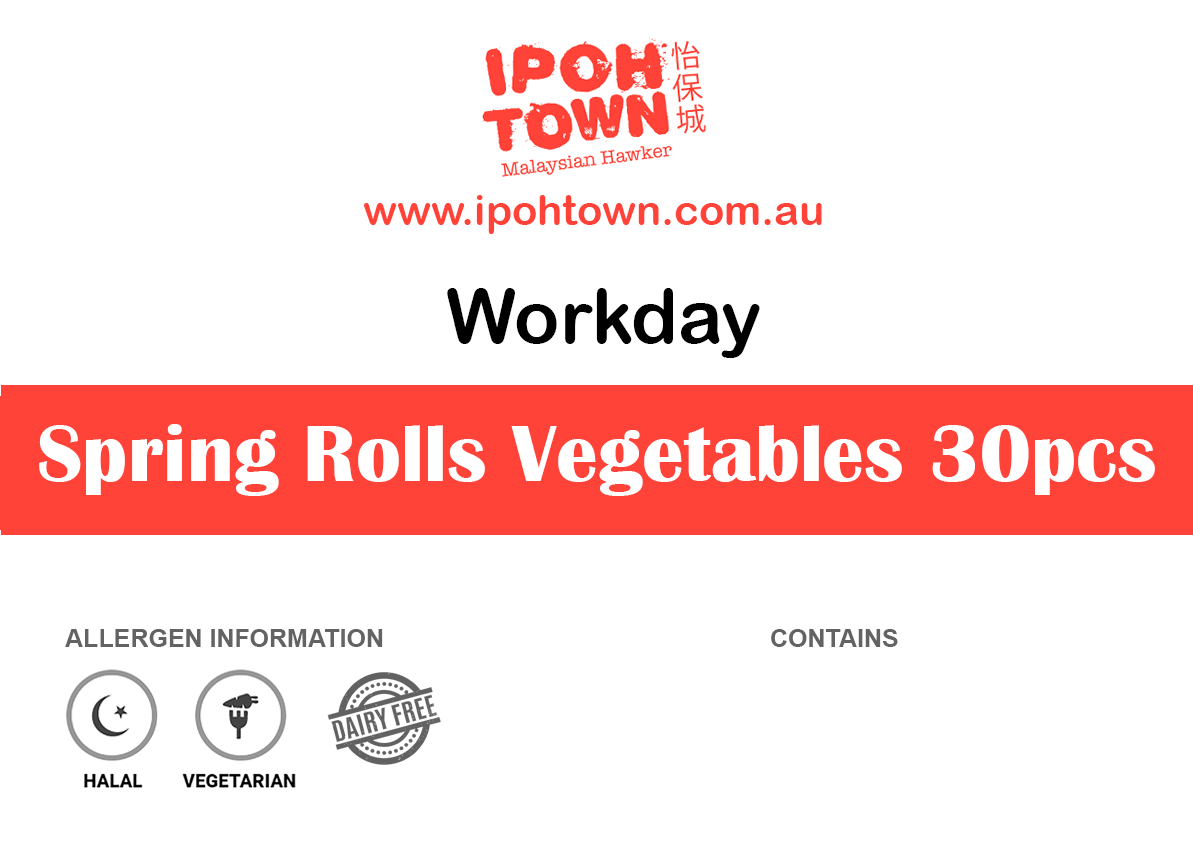
<style>
.page{position:relative;width:1193px;height:850px;background:#ffffff}
.page>*{position:absolute;margin:0}
.t1{font:41.7px "ArialRoundedMTBold";color:#ff4338}
.t2{font:75px "ArialRoundedMTBold";color:#000000}
.t3{font:83.3px "BritannicBold";color:#ffffff}
.t4{font:25px "Arial-BoldMT";color:#636363}
</style>
<div class="page">
<p class="t1" style="left:364px;top:195px;width:458px;height:39px">www.ipohtown.com.au</p>
<p class="t2" style="left:447px;top:288px;width:313px;height:70px">Workday</p>
<p class="t3" style="left:39px;top:424px;width:1116px;height:72px">Spring Rolls Vegetables 30pcs</p>
<p class="t4" style="left:65px;top:629px;width:318px;height:18px">ALLERGEN INFORMATION</p>
<p class="t4" style="left:771px;top:629px;width:127px;height:18px">CONTAINS</p>
</div>
